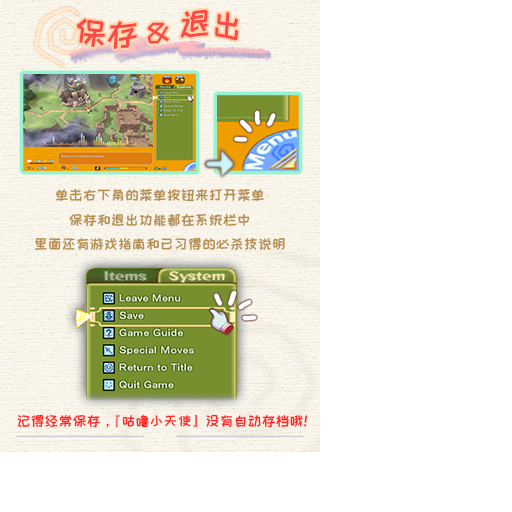
<style>
.page{position:relative;width:512px;height:512px;background:#ffffff}
.page>*{position:absolute;margin:0}
.t1{font:32px "HappyZcool-2016";color:#ff4949}
.t2{font:14px "HappyZcool-2016";color:#b58d4e}
.t3{font:14px "HappyZcool-2016";color:#ff2626}
</style>
<div class="page">
<p class="t1" style="left:76px;top:9px;width:163px;height:40px;rotate:5deg">保存&amp;退出</p>
<p class="t2" style="left:34px;top:188px;width:251px;height:63px;text-align:center">单击右下角的菜单按钮来打开菜单<br>保存和退出功能都在系统栏中<br>里面还有游戏指南和已习得的必杀技说明</p>
<p class="t3" style="left:17px;top:414px;width:291px;height:14px">记得经常保存，『咕噜小天使』没有自动存档哦！</p>
</div>
